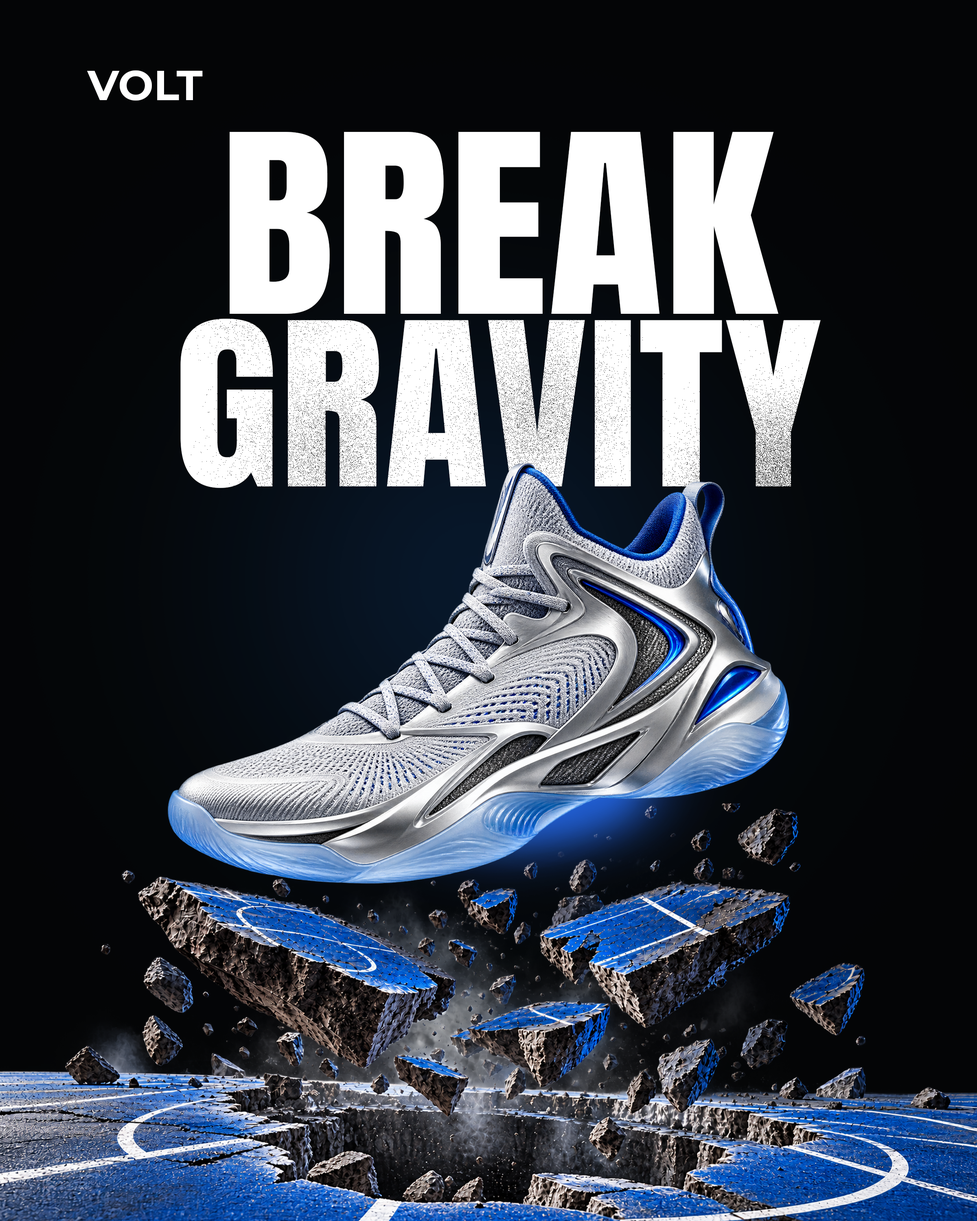
<style>
.page{position:relative;width:977px;height:1221px}
.page>*{position:absolute;margin:0}
.t1{font:42.1px "Montserrat-Bold";color:#ffffff;text-transform:uppercase}
.t2{font:211.7px "Anton-Regular";color:#ffffff;text-transform:uppercase;scale:1.12 1}
.t3{font:193.3px "Anton-Regular";color:#ffffff;text-transform:uppercase;scale:1.12 1}
</style>
<div class="page">
<p class="t1" style="left:87px;top:70px;width:116px;height:31px">VOLT</p>
<p class="t2" style="left:230px;top:132px;width:548px;height:182px">BREAK</p>
<p class="t3" style="left:180px;top:319px;width:640px;height:169px">GRAVITY</p>
</div>
